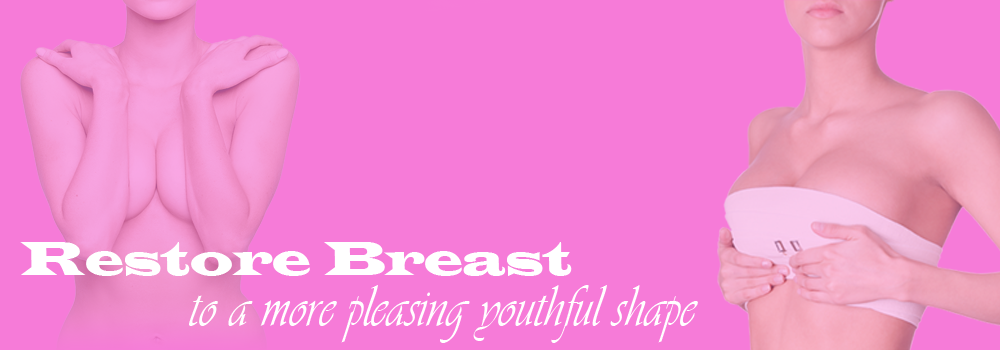
<style>
.page{position:relative;width:1000px;height:350px;background:#f67bd8}
.page>*{position:absolute;margin:0}
.t1{font:48.8px "LatinWide";color:#ffffff;scale:0.9 1}
.t2{font:60.9px "Vivaldii";color:#ffffff;scale:0.84 1}
</style>
<div class="page">
<p class="t1" style="left:20px;top:242px;width:552px;height:34px">Restore Breast</p>
<p class="t2" style="left:189px;top:285px;width:509px;height:58px">to a more pleasing youthful shape</p>
</div>
